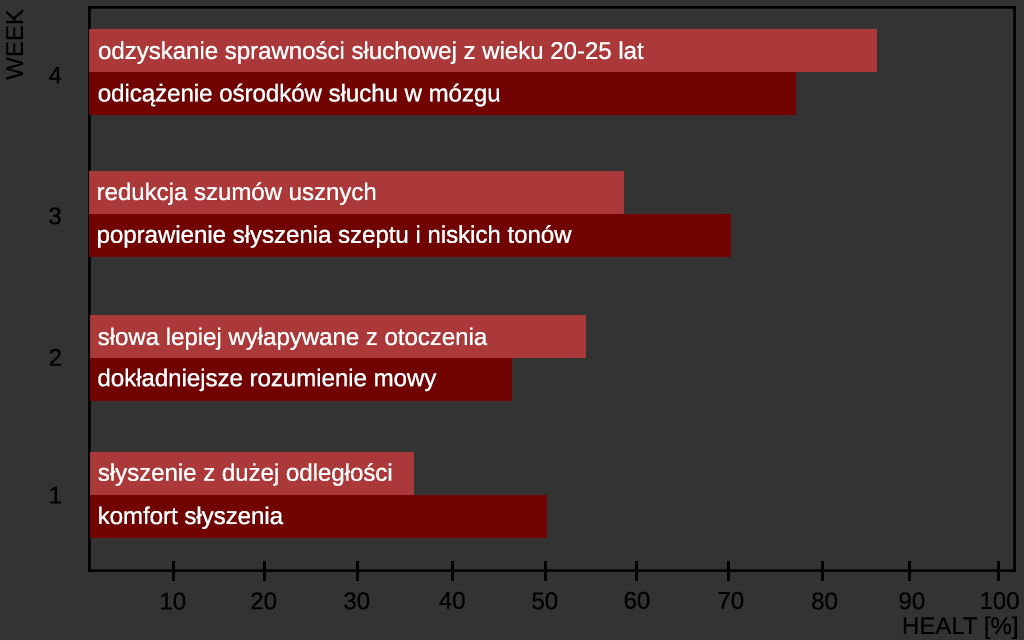
<style>
.page{position:relative;width:1024px;height:640px;background:#333333}
.page>*{position:absolute;margin:0}
.t1{font:24px "Arimo";color:#000000}
.t2{font:24px "Arimo";color:#ffffff}
</style>
<div class="page">
<p class="t1" style="left:6px;top:9px;width:17px;height:71px;rotate:-90deg">WEEK</p>
<p class="t2" style="left:99px;top:41px;width:545px;height:23px">odzyskanie sprawności słuchowej z wieku 20-25 lat</p>
<p class="t1" style="left:49px;top:66px;width:13px;height:18px">4</p>
<p class="t2" style="left:98px;top:83px;width:402px;height:24px">odicążenie ośrodków słuchu w mózgu</p>
<p class="t2" style="left:98px;top:182px;width:278px;height:23px">redukcja szumów usznych</p>
<p class="t1" style="left:49px;top:207px;width:12px;height:18px">3</p>
<p class="t2" style="left:98px;top:225px;width:474px;height:23px">poprawienie słyszenia szeptu i niskich tonów</p>
<p class="t2" style="left:98px;top:327px;width:390px;height:23px">słowa lepiej wyłapywane z otoczenia</p>
<p class="t1" style="left:49px;top:348px;width:12px;height:18px">2</p>
<p class="t2" style="left:98px;top:368px;width:339px;height:24px">dokładniejsze rozumienie mowy</p>
<p class="t2" style="left:98px;top:463px;width:294px;height:23px">słyszenie z dużej odległości</p>
<p class="t1" style="left:50px;top:486px;width:11px;height:18px">1</p>
<p class="t2" style="left:99px;top:506px;width:185px;height:23px">komfort słyszenia</p>
<p class="t1" style="left:161px;top:592px;width:25px;height:18px">10</p>
<p class="t1" style="left:251px;top:592px;width:26px;height:18px">20</p>
<p class="t1" style="left:344px;top:592px;width:26px;height:18px">30</p>
<p class="t1" style="left:439px;top:591px;width:26px;height:18px">40</p>
<p class="t1" style="left:532px;top:592px;width:26px;height:18px">50</p>
<p class="t1" style="left:624px;top:591px;width:26px;height:18px">60</p>
<p class="t1" style="left:718px;top:591px;width:26px;height:18px">70</p>
<p class="t1" style="left:812px;top:592px;width:25px;height:18px">80</p>
<p class="t1" style="left:899px;top:592px;width:26px;height:18px">90</p>
<p class="t1" style="left:981px;top:592px;width:38px;height:18px">100</p>
<p class="t1" style="left:903px;top:616px;width:114px;height:23px">HEALT [%]</p>
</div>
